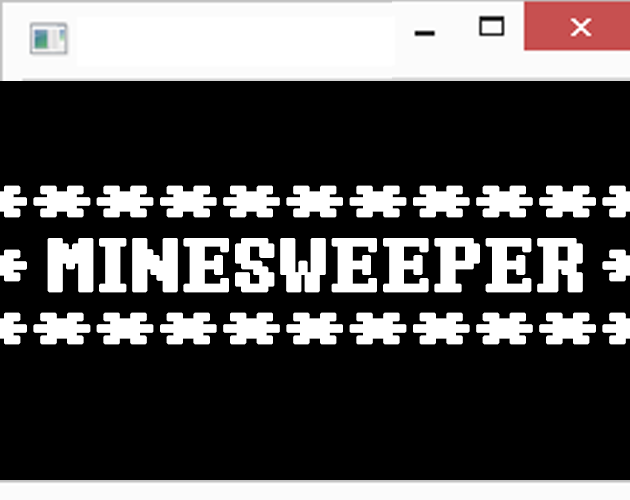
<style>
.page{position:relative;width:630px;height:500px;background:#000000}
.page>*{position:absolute;margin:0}
.t1{font:91.7px "Windows-Command-Prompt";color:#ffffff;font-weight:bold;scale:1.06 1}
</style>
<div class="page">
<p class="t1" style="left:47px;top:238px;width:536px;height:55px">MINESWEEPER</p>
</div>
